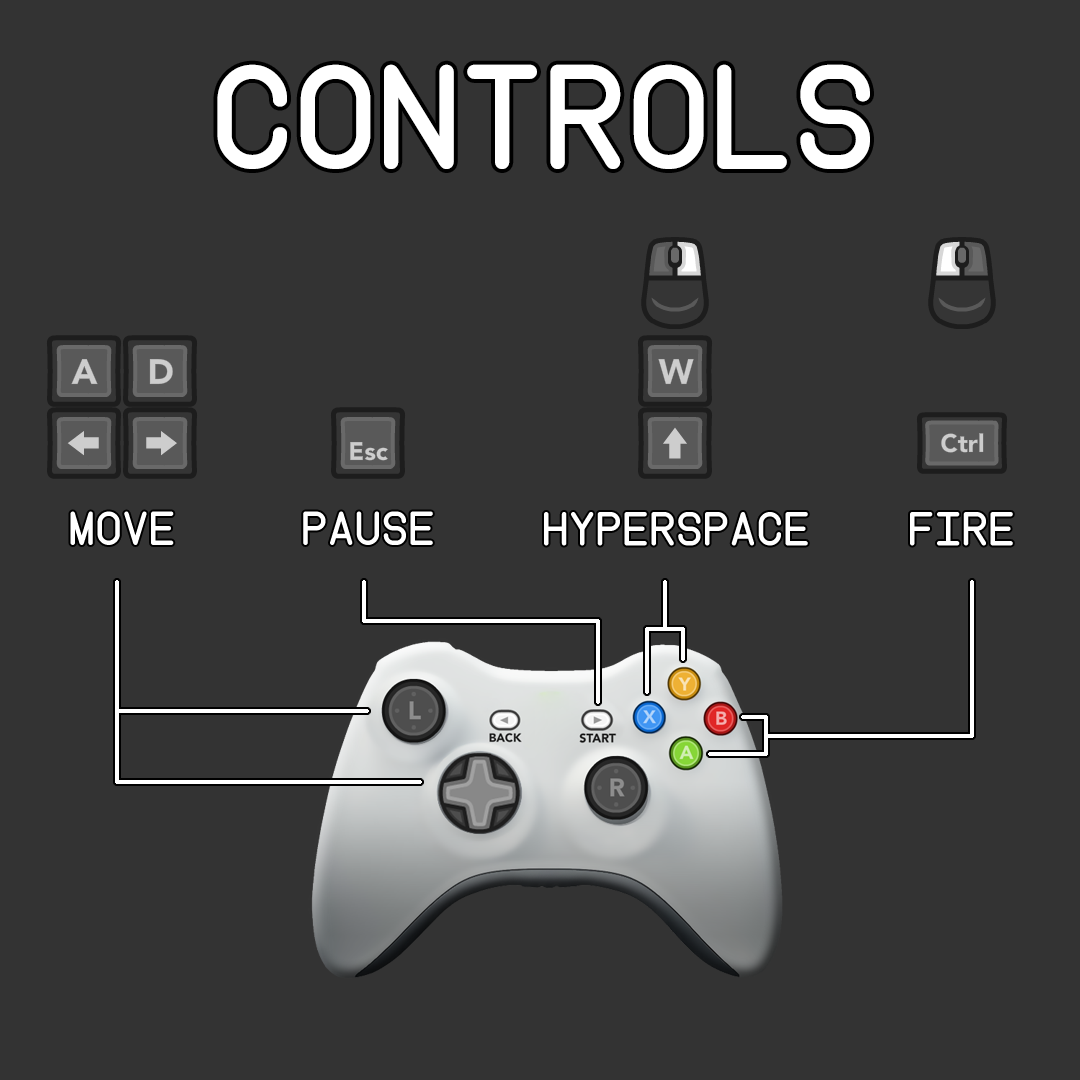
<style>
.page{position:relative;width:1080px;height:1080px;background:#333333}
.page>*{position:absolute;margin:0}
.t1{font:142.1px "Instruction";color:#ffffff}
.t2{font:45.8px "Instruction";color:#ffffff}
</style>
<div class="page">
<p class="t1" style="left:217px;top:64px;width:653px;height:105px">CONTROLS</p>
<p class="t2" style="left:70px;top:511px;width:104px;height:34px">MOVE</p>
<p class="t2" style="left:303px;top:511px;width:130px;height:34px">PAUSE</p>
<p class="t2" style="left:544px;top:512px;width:264px;height:34px">hyperspace</p>
<p class="t2" style="left:910px;top:512px;width:103px;height:34px">Fire</p>
</div>
